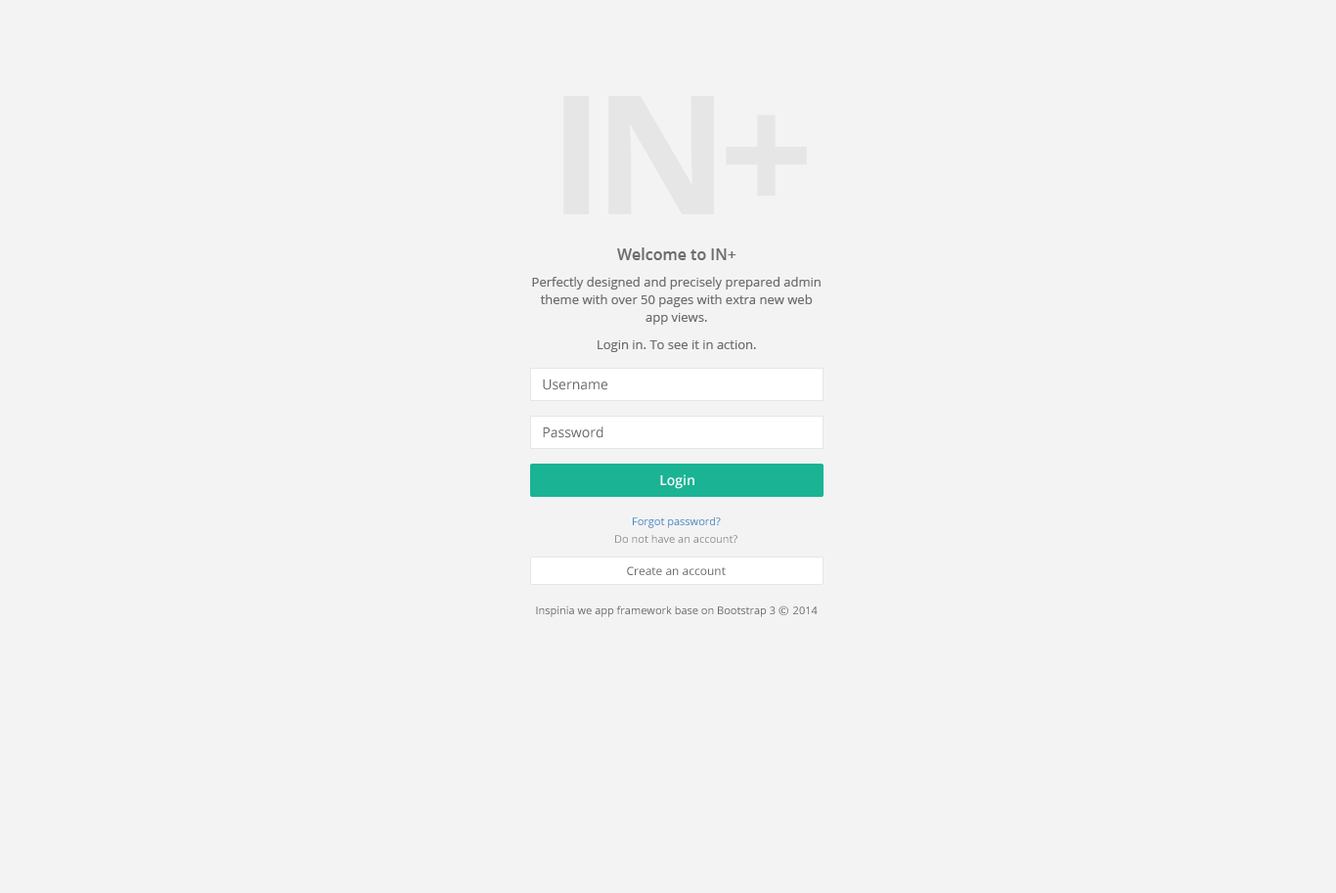
<style>
.page{position:relative;width:1336px;height:893px;background:#f3f3f4}
.page>*{position:absolute;margin:0}
.t1{font:166.2px "OpenSans-Bold";letter-spacing:-0.06em;color:#e6e6e6}
.t2{font:15.6px "OpenSans-Semibold";color:#6b6e70}
.t3{font:12.7px/17.6px "OpenSans";color:#6b6e70}
.t4{font:13.7px "OpenSans";color:#676a6c}
.t5{font:13.7px "OpenSans-Semibold";color:#ffffff}
.t6{font:10.8px "OpenSans";color:#4988be}
.t7{font:10.8px "OpenSans";color:#909090}
.t8{font:11.7px "OpenSans";color:#676a6c}
.t9{font:10.8px "OpenSans";color:#676a6c}
.t10{font:10.8px "Meiryo";color:#676a6c}
</style>
<div class="page">
<p class="t1" style="left:563px;top:96px;width:244px;height:118px">IN+</p>
<p class="t2" style="left:617px;top:247px;width:119px;height:13px">Welcome to IN+</p>
<p class="t3" style="left:532px;top:277px;width:288px;height:75px;text-align:center">Perfectly designed and precisely prepared admin<br>theme with over 50 pages with extra new web app views.<br><br>Login in. To see it in action.</p>
<p class="t4" style="left:543px;top:379px;width:64px;height:11px">Username</p>
<p class="t4" style="left:543px;top:426px;width:60px;height:12px">Password</p>
<p class="t5" style="left:660px;top:474px;width:34px;height:15px">Login</p>
<p class="t6" style="left:633px;top:516px;width:88px;height:12px">Forgot password?</p>
<p class="t7" style="left:615px;top:534px;width:122px;height:9px">Do not have an account?</p>
<p class="t8" style="left:627px;top:566px;width:99px;height:9px">Create an account</p>
<p class="t9" style="left:536px;top:605px;width:281px;height:12px">Inspinia we app framework base on Bootstrap 3 <span class="t10">© </span>2014</p>
</div>
